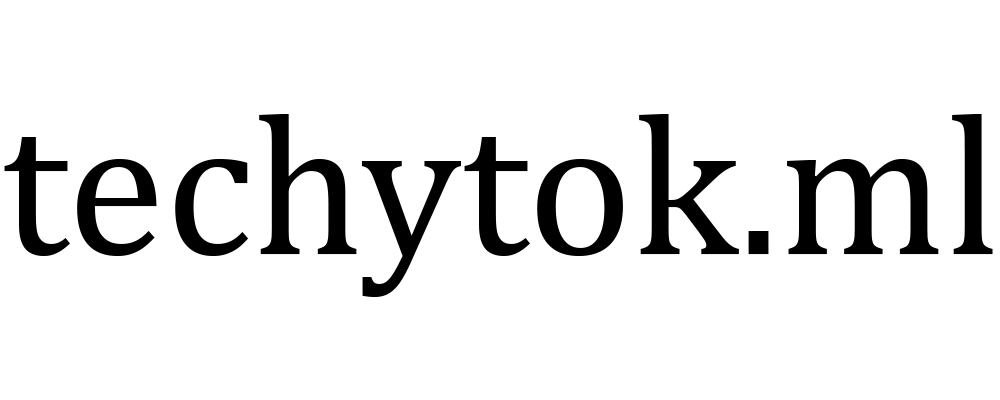
<style>
.page{position:relative;width:1000px;height:400px;background:#ffffff}
.page>*{position:absolute;margin:0}
.t1{font:200.3px "Cambria";color:#000000}
</style>
<div class="page">
<p class="t1" style="left:4px;top:114px;width:989px;height:183px">techytok.ml</p>
</div>
